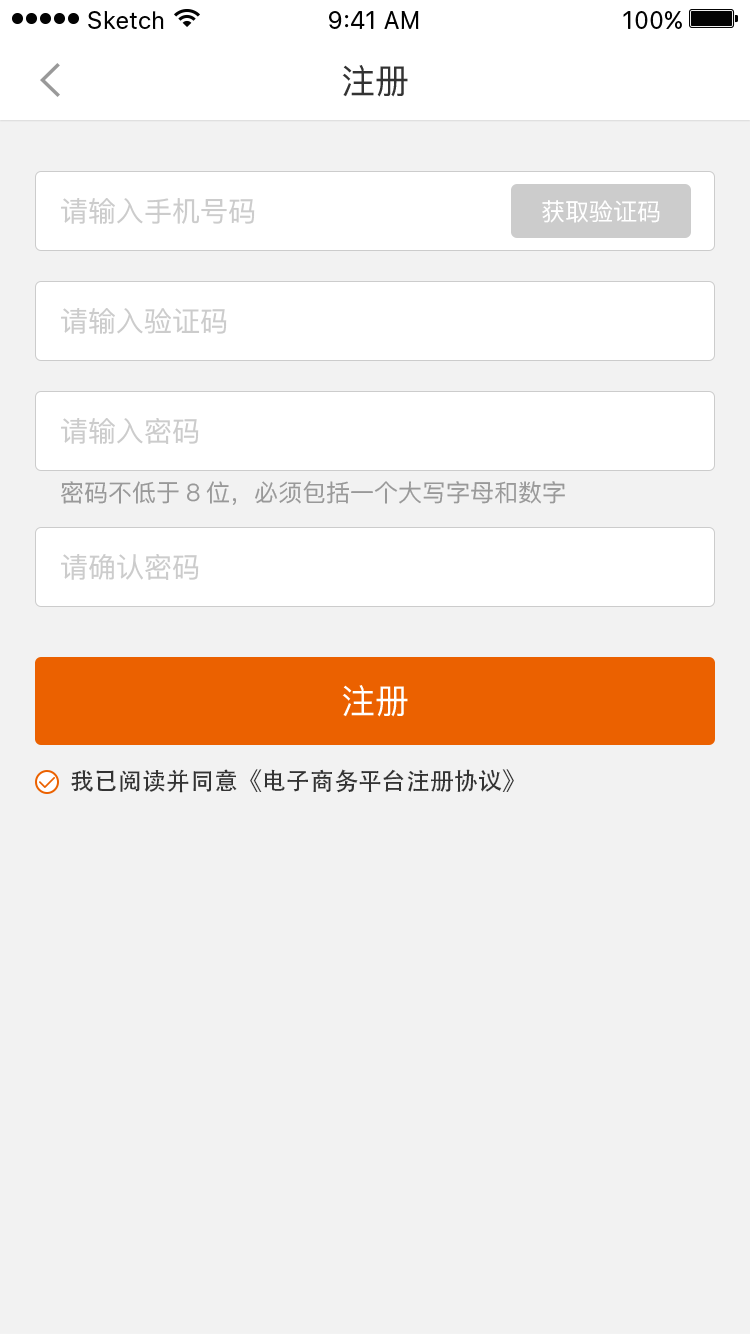
<style>
.page{position:relative;width:750px;height:1334px;background:#f2f2f2}
.page>*{position:absolute;margin:0}
.t1{font:34px "PingFangSC-Regular";color:#333333}
.t2{font:28px "PingFangSC-Regular";color:#cccccc}
.t3{font:24px "PingFangSC-Regular";color:#ffffff}
.t4{font:24px "PingFangSC-Regular";color:#999999}
.t5{font:34px "PingFangSC-Regular";color:#ffffff}
.t6{font:24px "AdobeHeitiStd-Regular";color:#333333}
</style>
<div class="page">
<p class="t1" style="left:342px;top:65px;width:66px;height:32px">注册</p>
<p class="t2" style="left:61px;top:198px;width:194px;height:26px">请输入手机号码</p>
<p class="t3" style="left:542px;top:200px;width:118px;height:23px">获取验证码</p>
<p class="t2" style="left:61px;top:308px;width:166px;height:26px">请输入验证码</p>
<p class="t2" style="left:61px;top:418px;width:138px;height:26px">请输入密码</p>
<p class="t4" style="left:61px;top:481px;width:504px;height:24px">密码不低于8位，必须包括一个大写字母和数字</p>
<p class="t2" style="left:61px;top:554px;width:138px;height:26px">请确认密码</p>
<p class="t5" style="left:342px;top:685px;width:66px;height:32px">注册</p>
<p class="t6" style="left:71px;top:769px;width:443px;height:24px">我已阅读并同意《电子商务平台注册协议》</p>
</div>
